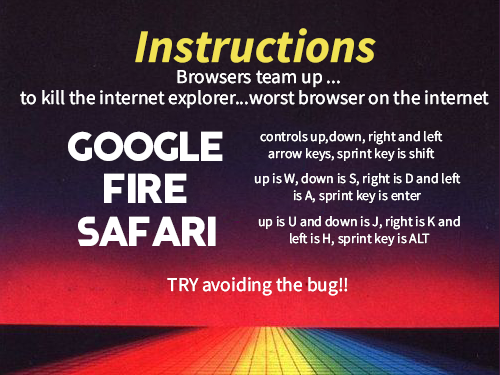
<style>
.page{position:relative;width:500px;height:375px}
.page>*{position:absolute;margin:0}
.t1{font:46.9px "SourceSansItalic-BoldItalic";color:#f1e253}
.t2{font:19.5px "SourceSansRoman-Regular";color:#ffffff}
.t3{font:58.4px "Basic_LAZER";color:#ffffff}
.t4{font:13.9px "SourceSansRoman-Regular";color:#ffffff}
.t5{font:58.4px "Basic_LAZER";letter-spacing:0.02em;color:#ffffff}
</style>
<div class="page">
<p class="t1" style="left:135px;top:28px;width:241px;height:35px">Instructions</p>
<p class="t2" style="left:177px;top:70px;width:163px;height:18px">Browsers team up ...</p>
<p class="t2" style="left:20px;top:90px;width:469px;height:19px">to kill the internet explorer...worst browser on the internet internet</p>
<p class="t3" style="left:68px;top:131px;width:155px;height:30px">google</p>
<p class="t4" style="left:260px;top:130px;width:183px;height:31px;text-align:center">controls up,down, right and left arrow keys, sprint key is shift</p>
<p class="t5" style="left:104px;top:173px;width:83px;height:30px">fire</p>
<p class="t4" style="left:254px;top:172px;width:207px;height:31px;text-align:center">up is W, down is S, right is D and left is A, sprint key is enter</p>
<p class="t3" style="left:78px;top:216px;width:138px;height:30px">SAFARI</p>
<p class="t4" style="left:258px;top:216px;width:202px;height:30px;text-align:center">up is U and down is J, right is K and left is H, sprint key is ALT</p>
<p class="t2" style="left:167px;top:277px;width:181px;height:19px">TRY avoiding the bug!!</p>
</div>
